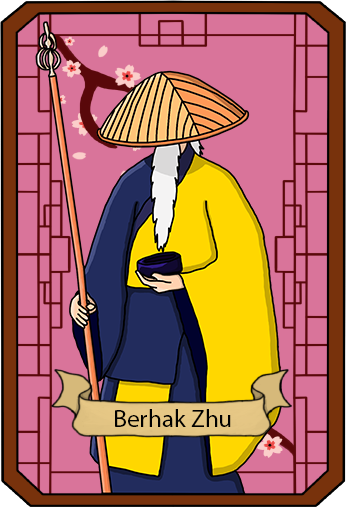
<style>
.page{position:relative;width:346px;height:507px;background:#d9749a}
.page>*{position:absolute;margin:0}
.t1{font:25px "MyriadPro-Regular";color:#000000}
</style>
<div class="page">
<p class="t1" style="left:115px;top:409px;width:116px;height:18px">Berhak Zhu</p>
</div>
